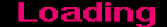
<style>
.page{position:relative;width:167px;height:27px;background:#000000}
.page>*{position:absolute;margin:0}
.t1{font:25px "System";color:#ec0371;font-weight:bold;scale:1.41 1}
</style>
<div class="page">
<p class="t1" style="left:18px;top:2px;width:137px;height:26px">Loading</p>
</div>
